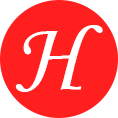
<style>
.page{position:relative;width:118px;height:118px;background:#ff1f1f}
.page>*{position:absolute;margin:0}
.t1{font:100px "STLiti";color:#ffffff}
</style>
<div class="page">
<p class="t1" style="left:15px;top:25px;width:88px;height:67px">H</p>
</div>
